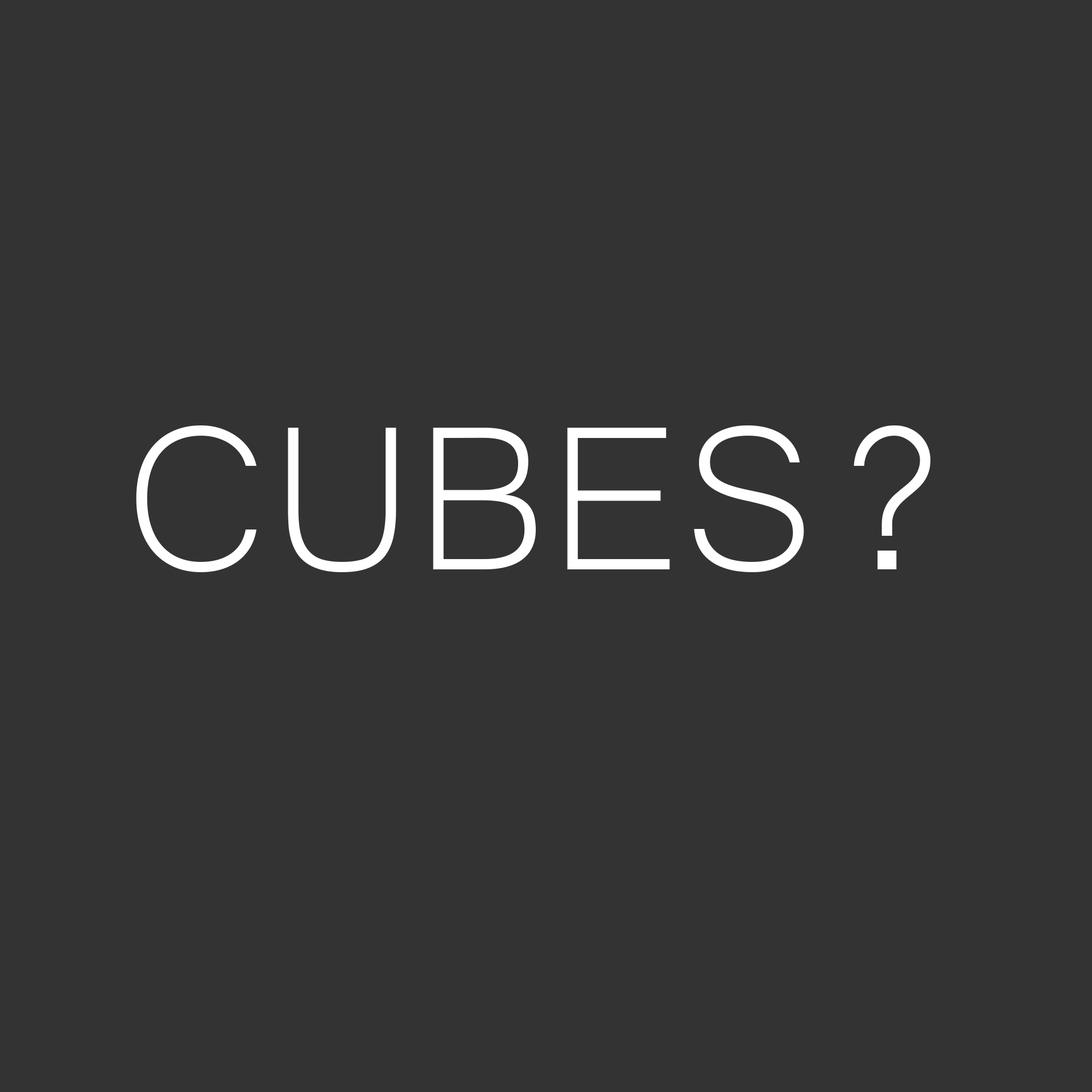
<style>
.page{position:relative;width:1092px;height:1092px;background:#333333}
.page>*{position:absolute;margin:0}
.t1{font:264.7px "Microsoft-Yi-Baiti";color:#ffffff}
</style>
<div class="page">
<p class="t1" style="left:136px;top:425px;width:794px;height:147px">CUBES?</p>
</div>
